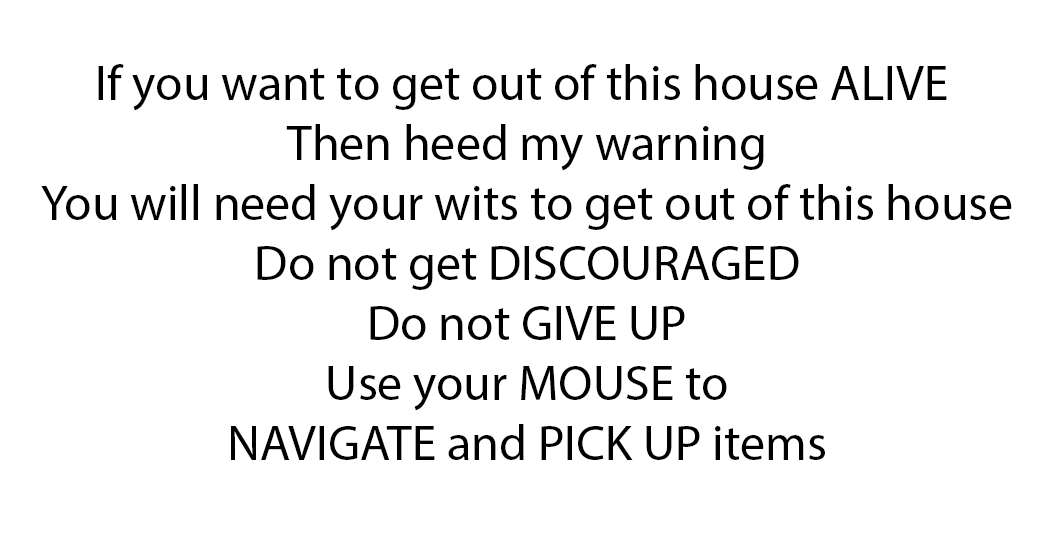
<style>
.page{position:relative;width:1042px;height:540px;background:#ffffff}
.page>*{position:absolute;margin:0}
.t1{font:12px "MyriadPro-Regular";color:#000000}
</style>
<div class="page">
<p class="t1" style="left:41px;top:64px;width:971px;height:396px;text-align:center">If you want to get out of this house ALIVE <br>Then heed my warning<br>You will need your wits to get out of this house<br>Do not get DISCOURAGED<br>Do not GIVE UP<br>Use your MOUSE to<br>NAVIGATE and PICK UP items</p>
</div>
